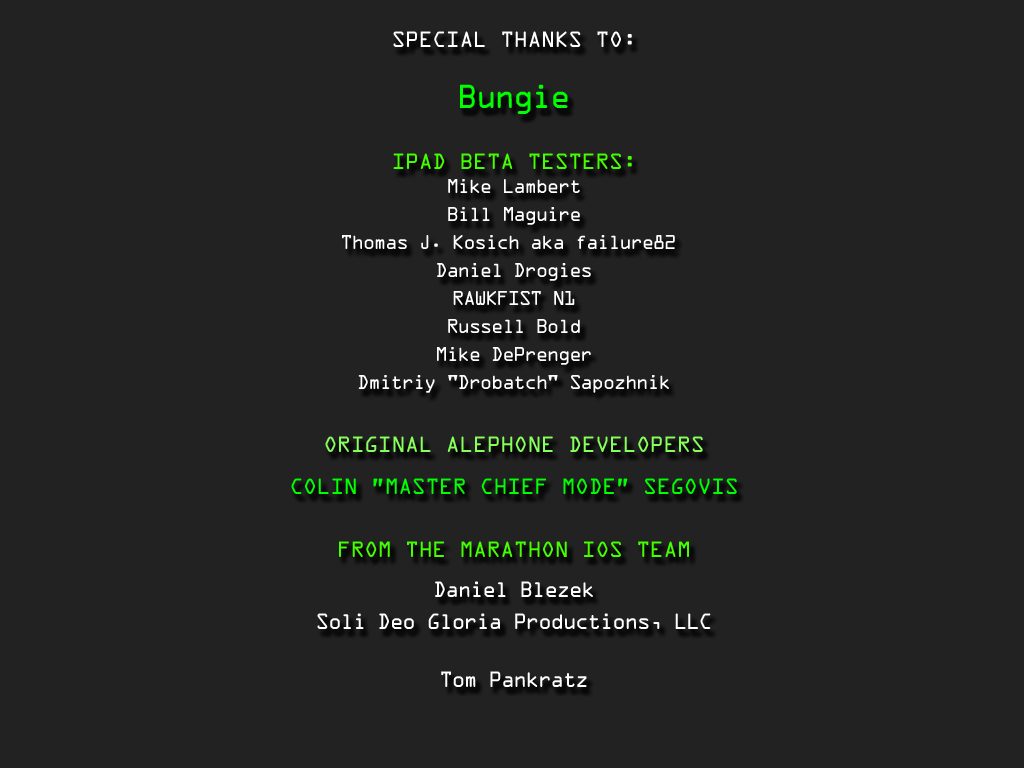
<style>
.page{position:relative;width:1024px;height:768px;background:#222222}
.page>*{position:absolute;margin:0}
.t1{font:18px/28px "OCRAStd";letter-spacing:-0.1em;color:#ffffff}
.t2{font:20px/21px "OCRAStd";letter-spacing:-0.04em;color:#ffffff;text-transform:uppercase}
.t3{font:30px/40px "OCRAStd";letter-spacing:-0.1em;color:#00ff00}
.t4{font:20px/21px "OCRAStd";letter-spacing:-0.04em;color:#43ff00;text-transform:uppercase}
.t5{font:18px/24px "OCRAStd";letter-spacing:-0.1em;color:#ffffff}
.t6{font:20px/21px "OCRAStd";letter-spacing:-0.04em;color:#87ff5b;text-transform:uppercase}
.t7{font:20px/21px "OCRAStd";letter-spacing:-0.04em;color:#00ff00;text-transform:uppercase}
.t8{font:19.9px/40px "OCRAStd";letter-spacing:-0.1em;color:#fefefe}
.t9{font:19.9px/32px "OCRAStd";letter-spacing:-0.1em;color:#fefefe}
.t10{font:19.9px/37px "OCRAStd";letter-spacing:-0.1em;color:#fefefe}
</style>
<div class="page">
<p class="t1" style="left:291px;top:31px;width:446px;height:656px;text-align:center"><span class="t2">Special Thanks to:<br><br></span><span class="t3">Bungie<br><br></span><span class="t4">iPad Beta Testers:<br></span><span class="t5">Mike Lambert<br></span>Bill Maguire<br>Thomas J. Kosich aka failure82 <br>Daniel Drogies<br>RAWKFIST N1<br>Russell Bold<br>Mike DePrenger<br>Dmitriy "Drobatch" Sapozhnik<br><br><br><span class="t6">Original AlephOne developers<br><br></span><span class="t7">Colin ”Master Chief Mode” Segovis<br></span><span class="t4"><br><br>from the Marathon iOS team<br></span><span class="t8">Daniel Blezek<br></span><span class="t9">Soli Deo Gloria Productions, LLC<br><br></span><span class="t10">Tom Pankratz</span></p>
</div>
